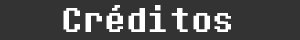
<style>
.page{position:relative;width:300px;height:40px;background:#333333}
.page>*{position:absolute;margin:0}
.t1{font:36px "DeterminationMono";color:#ffffff}
</style>
<div class="page">
<p class="t1" style="left:63px;top:5px;width:168px;height:27px">Créditos</p>
</div>
